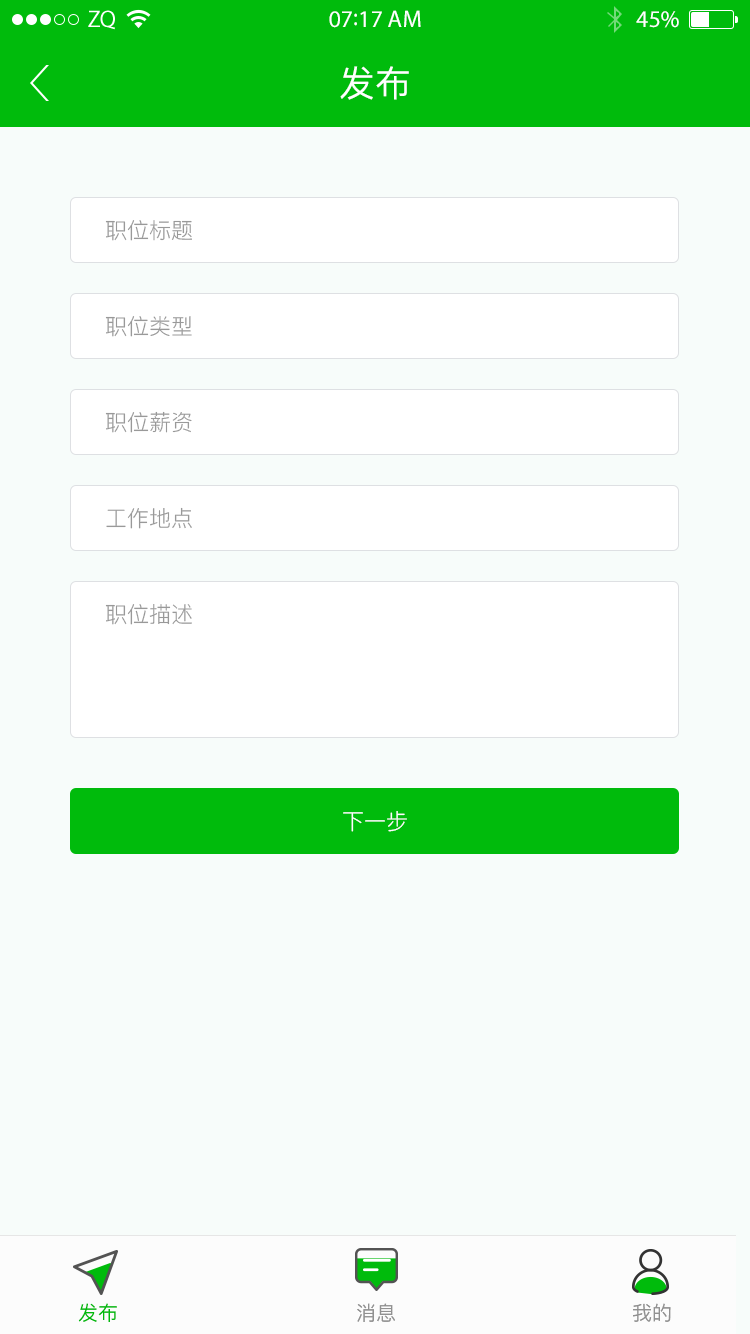
<style>
.page{position:relative;width:750px;height:1334px;background:#f7fcfa}
.page>*{position:absolute;margin:0}
.t1{font:24px "MyriadPro-Regular";color:#ffffff}
.t2{font:36px "PingFang-SC-Medium";color:#ffffff}
.t3{font:22px "PingFang-SC-Regular";color:#999999}
.t4{font:22px "PingFang-SC-Regular";color:#ffffff}
.t5{font:20px "PingFang-SC-Medium";color:#00bb0c}
.t6{font:20px "PingFang-SC-Medium";color:#919191}
</style>
<div class="page">
<p class="t1" style="left:329px;top:10px;width:92px;height:18px">07:17 AM</p>
<p class="t1" style="left:636px;top:11px;width:43px;height:17px">45%</p>
<p class="t2" style="left:340px;top:66px;width:69px;height:34px">发布</p>
<p class="t3" style="left:105px;top:220px;width:87px;height:21px">职位标题</p>
<p class="t3" style="left:105px;top:316px;width:87px;height:21px">职位类型</p>
<p class="t3" style="left:105px;top:411px;width:87px;height:22px">职位薪资</p>
<p class="t3" style="left:106px;top:507px;width:86px;height:22px">工作地点</p>
<p class="t3" style="left:105px;top:604px;width:87px;height:21px">职位描述</p>
<p class="t4" style="left:343px;top:811px;width:64px;height:21px">下一步</p>
<p class="t5" style="left:78px;top:1303px;width:39px;height:19px">发布</p>
<p class="t6" style="left:357px;top:1303px;width:38px;height:19px">消息</p>
<p class="t6" style="left:633px;top:1303px;width:38px;height:19px">我的</p>
</div>
